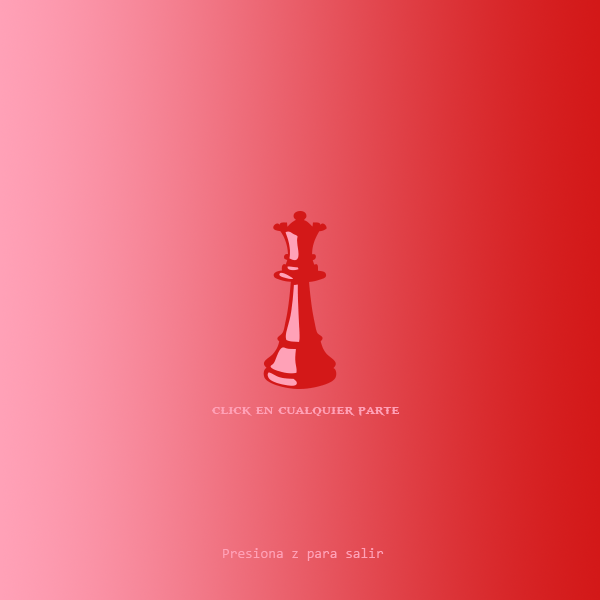
<style>
.page{position:relative;width:600px;height:600px}
.page>*{position:absolute;margin:0}
.t1{font:14px "GodOfWar";color:#ffa1b7}
.t2{font:14px "Consolas";color:#ffa1b7}
</style>
<div class="page">
<p class="t1" style="left:212px;top:407px;width:188px;height:9px">click en cualquier parte</p>
<p class="t2" style="left:223px;top:548px;width:161px;height:13px">Presiona z para salir</p>
</div>
